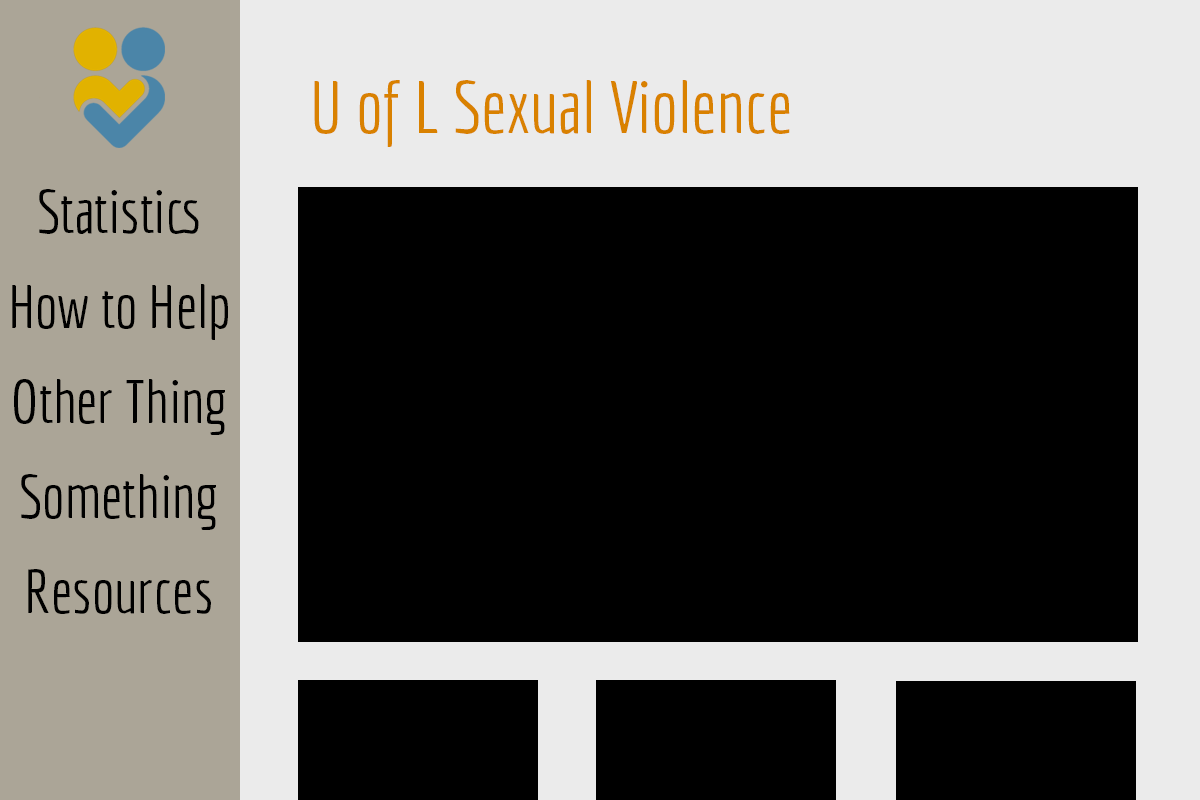
<style>
.page{position:relative;width:1200px;height:800px;background:#000000}
.page>*{position:absolute;margin:0}
.t1{font:72px "Economica-Regular";color:#d98100}
.t2{font:60px/95px "Economica-Regular";color:#000000}
</style>
<div class="page">
<p class="t1" style="left:314px;top:80px;width:476px;height:67px">U of L Sexual Violence</p>
<p class="t2" style="left:12px;top:189px;width:216px;height:425px;text-align:center">Statistics<br>How to Help<br>Other Thing<br>Something<br>Resources</p>
</div>
